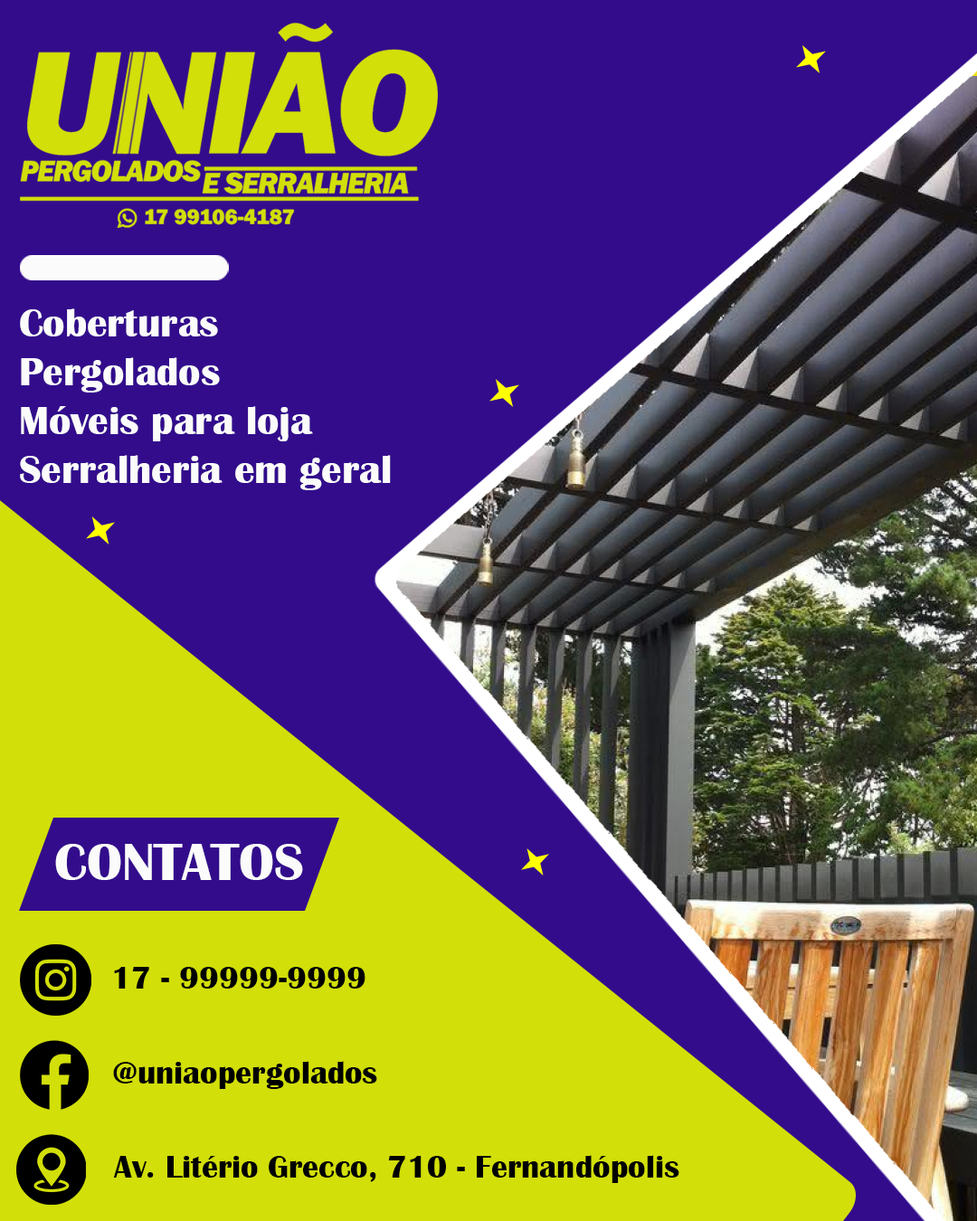
<style>
.page{position:relative;width:977px;height:1221px;background:#330c8c}
.page>*{position:absolute;margin:0}
.t1{font:40.6px "BritannicBold";color:#fbfbfb}
.t2{font:53.9px "BritannicBold";color:#fbfbfb}
.t3{font:32.6px "BritannicBold";color:#000000}
</style>
<div class="page">
<p class="t1" style="left:20px;top:308px;width:371px;height:182px">Coberturas<br>Pergolados<br>Móveis para loja<br>Serralheria em geral</p>
<p class="t2" style="left:55px;top:844px;width:248px;height:36px">CONTATOS</p>
<p class="t3" style="left:114px;top:967px;width:251px;height:21px">17 - 99999-9999</p>
<p class="t3" style="left:113px;top:1061px;width:264px;height:28px">@uniaopergolados</p>
<p class="t3" style="left:113px;top:1155px;width:566px;height:28px">Av. Litério Grecco, 710 - Fernandópolis</p>
</div>
